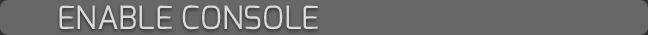
<style>
.page{position:relative;width:648px;height:35px;background:#676767}
.page>*{position:absolute;margin:0}
.t1{font:32px "Exo-Regular";color:#d9d9d9;text-transform:uppercase}
</style>
<div class="page">
<p class="t1" style="left:59px;top:5px;width:259px;height:25px">Enable Console</p>
</div>
